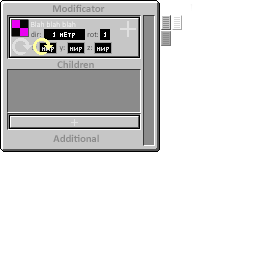
<style>
.page{position:relative;width:256px;height:256px;background:#ffffff}
.page>*{position:absolute;margin:0}
.t1{font:10.7px "Calibri-Bold";color:#8b8b8b}
.t2{font:8px "Calibri-Light";color:#ffffff}
.t3{font:8px "Calibri-Light"}
</style>
<div class="page">
<p class="t1" style="left:53px;top:4px;width:52px;height:8px">Modificator</p>
<p class="t2" style="left:31px;top:21px;width:45px;height:6px">Blah blah blah</p>
<p class="t3" style="left:31px;top:31px;width:10px;height:6px">dir:</p>
<p class="t3" style="left:87px;top:32px;width:11px;height:5px">rot:</p>
<p class="t3" style="left:32px;top:46px;width:5px;height:4px">x:</p>
<p class="t3" style="left:59px;top:46px;width:6px;height:6px">y:</p>
<p class="t3" style="left:87px;top:46px;width:5px;height:4px">z:</p>
<p class="t1" style="left:57px;top:60px;width:37px;height:8px">Children</p>
<p class="t1" style="left:53px;top:134px;width:46px;height:8px">Additional</p>
</div>
